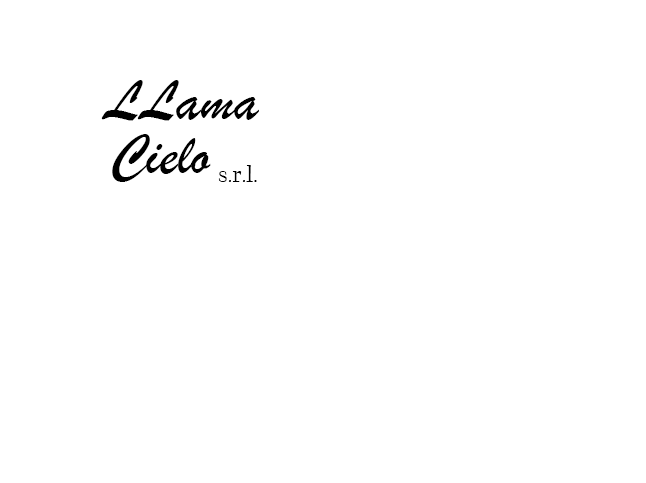
<style>
.page{position:relative;width:646px;height:483px;background:#ffffff}
.page>*{position:absolute;margin:0}
.t1{font:60px "BrushScriptMT";color:#000000}
.t2{font:24px "CalifornianFB-Reg";color:#000000}
</style>
<div class="page">
<p class="t1" style="left:101px;top:80px;width:158px;height:41px">LLama</p>
<p class="t1" style="left:112px;top:134px;width:99px;height:48px">Cielo</p>
<p class="t2" style="left:218px;top:165px;width:39px;height:17px">s.r.l.</p>
</div>
